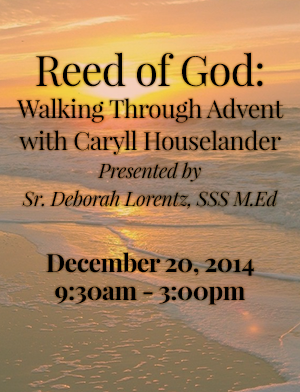
<style>
.page{position:relative;width:300px;height:392px}
.page>*{position:absolute;margin:0}
.t1{font:25px/32px "PlayfairDisplay-Regular";letter-spacing:-0.02em;color:#000000}
.t2{font:42px/45px "PlayfairDisplay-Regular";letter-spacing:-0.02em;color:#000000}
.t3{font:20px/28px "PlayfairDisplay-Italic";letter-spacing:-0.02em;color:#000000}
.t4{font:25px/28px "PlayfairDisplay-Bold";letter-spacing:-0.02em;color:#000000}
</style>
<div class="page">
<p class="t1" style="left:17px;top:52px;width:267px;height:253px;text-align:center"><span class="t2">Reed of God:<br></span>Walking Through Advent with Caryll Houselander<br><span class="t3">Presented by <br>Sr. Deborah Lorentz, SSS M.Ed<br><br></span><span class="t4">December 20, 2014<br>9:30am - 3:00pm</span></p>
</div>
